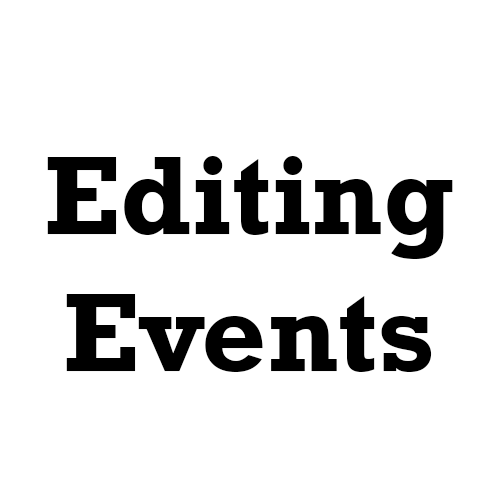
<style>
.page{position:relative;width:500px;height:500px;background:#ffffff}
.page>*{position:absolute;margin:0}
.t1{font:114px "Rockwell-Bold";color:#000000}
</style>
<div class="page">
<p class="t1" style="left:47px;top:156px;width:406px;height:216px;text-align:center">Editing<br>Events</p>
</div>
